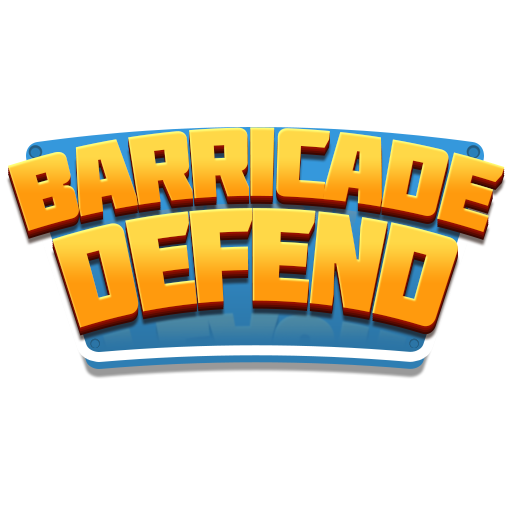
<style>
.page{position:relative;width:512px;height:512px;background:#ffffff}
.page>*{position:absolute;margin:0}
.t1{font:98.8px "Molot";letter-spacing:-0.05em;text-transform:uppercase}
.t2{font:131.7px "Molot";letter-spacing:-0.05em;text-transform:uppercase;scale:0.83 1}
.t3{font:90.5px "Molot";letter-spacing:-0.05em;text-transform:uppercase}
</style>
<div class="page">
<p class="t1" style="left:8px;top:127px;width:497px;height:105px">BARRICADE</p>
<p class="t2" style="left:52px;top:208px;width:406px;height:120px">defend</p>
<p class="t3" style="left:67px;top:203px;width:380px;height:91px">building</p>
</div>
